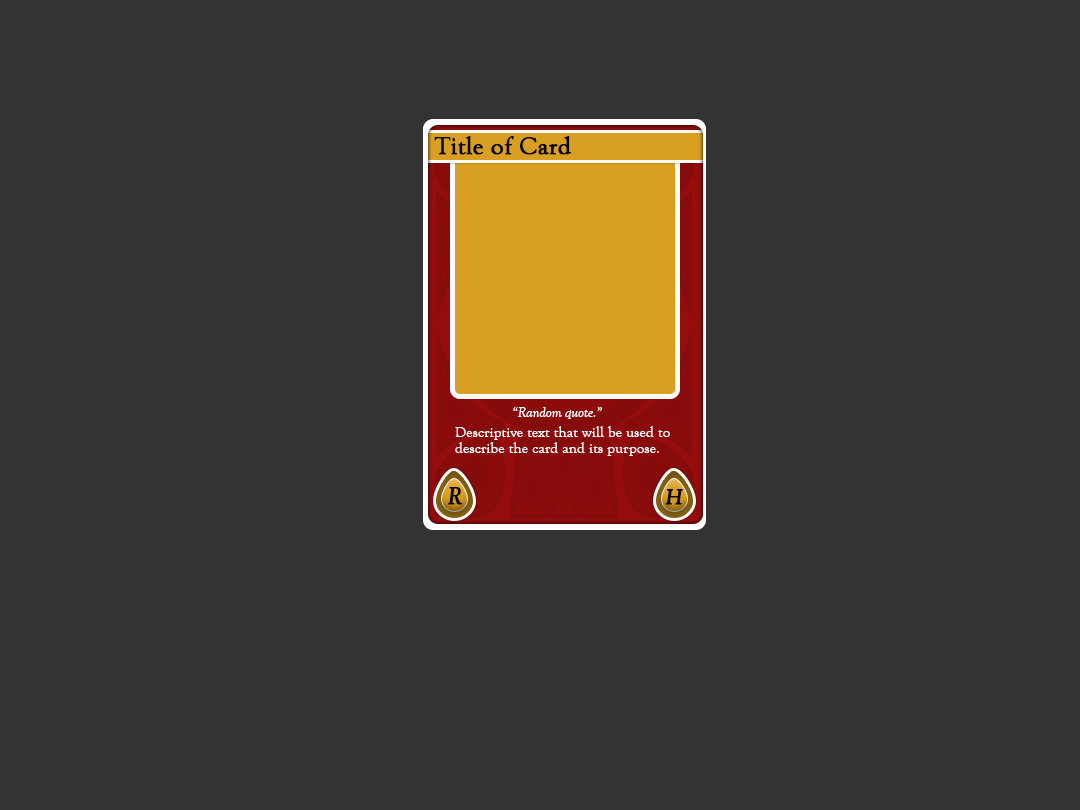
<style>
.page{position:relative;width:1080px;height:810px;background:#333333}
.page>*{position:absolute;margin:0}
.t1{font:25px "GoudyOldStyleT-Regular";color:#000000;font-weight:bold}
.t2{font:14.6px "GoudyOldStyleT-Italic";color:#ffffff}
.t3{font:14.6px/16.7px "GoudyOldStyleT-Regular";letter-spacing:0.025em;color:#ffffff}
.t4{font:25px "GoudyOldStyleT-Italic";letter-spacing:0.025em;color:#000000;font-weight:bold}
.t5{font:22.9px "GoudyOldStyleT-Italic";letter-spacing:0.025em;color:#000000;font-weight:bold}
</style>
<div class="page">
<p class="t1" style="left:434px;top:136px;width:137px;height:19px">Title of Card</p>
<p class="t2" style="left:513px;top:407px;width:89px;height:12px">“Random quote.”</p>
<p class="t3" style="left:455px;top:426px;width:215px;height:30px">Descriptive text that will be used to<br>describe the card and its purpose.</p>
<p class="t4" style="left:448px;top:487px;width:15px;height:18px">R</p>
<p class="t5" style="left:665px;top:489px;width:18px;height:16px">H</p>
</div>
